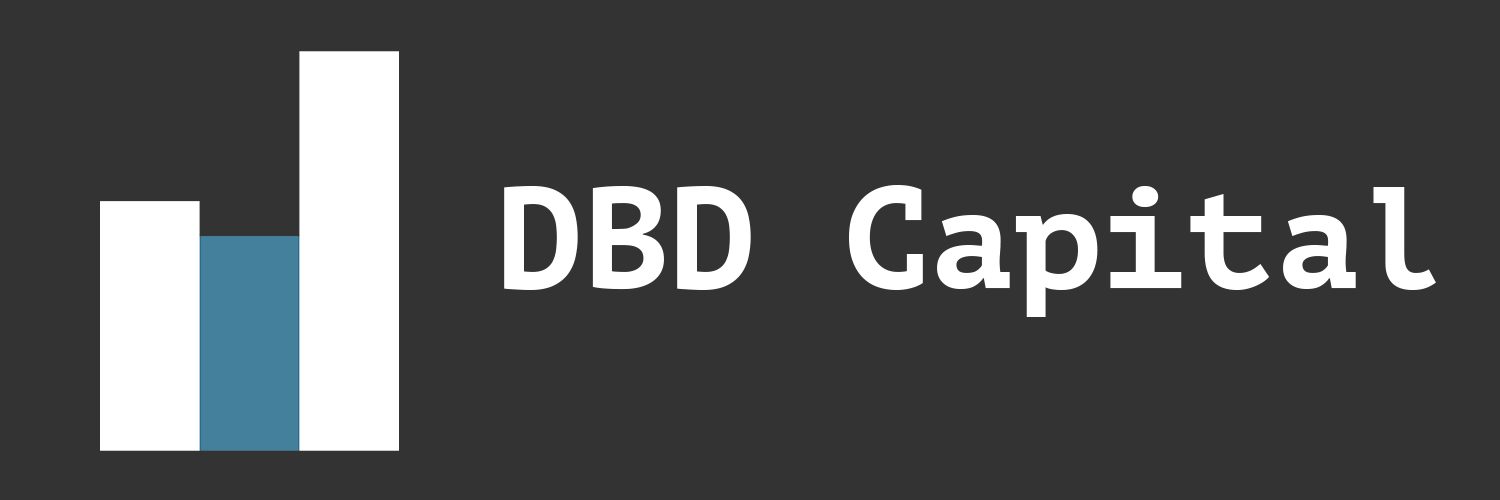
<style>
.page{position:relative;width:1500px;height:500px;background:#333333}
.page>*{position:absolute;margin:0}
.t1{font:144px "PTMono-Bold";color:#ffffff}
</style>
<div class="page">
<p class="t1" style="left:504px;top:185px;width:932px;height:132px">DBD Capital</p>
</div>
